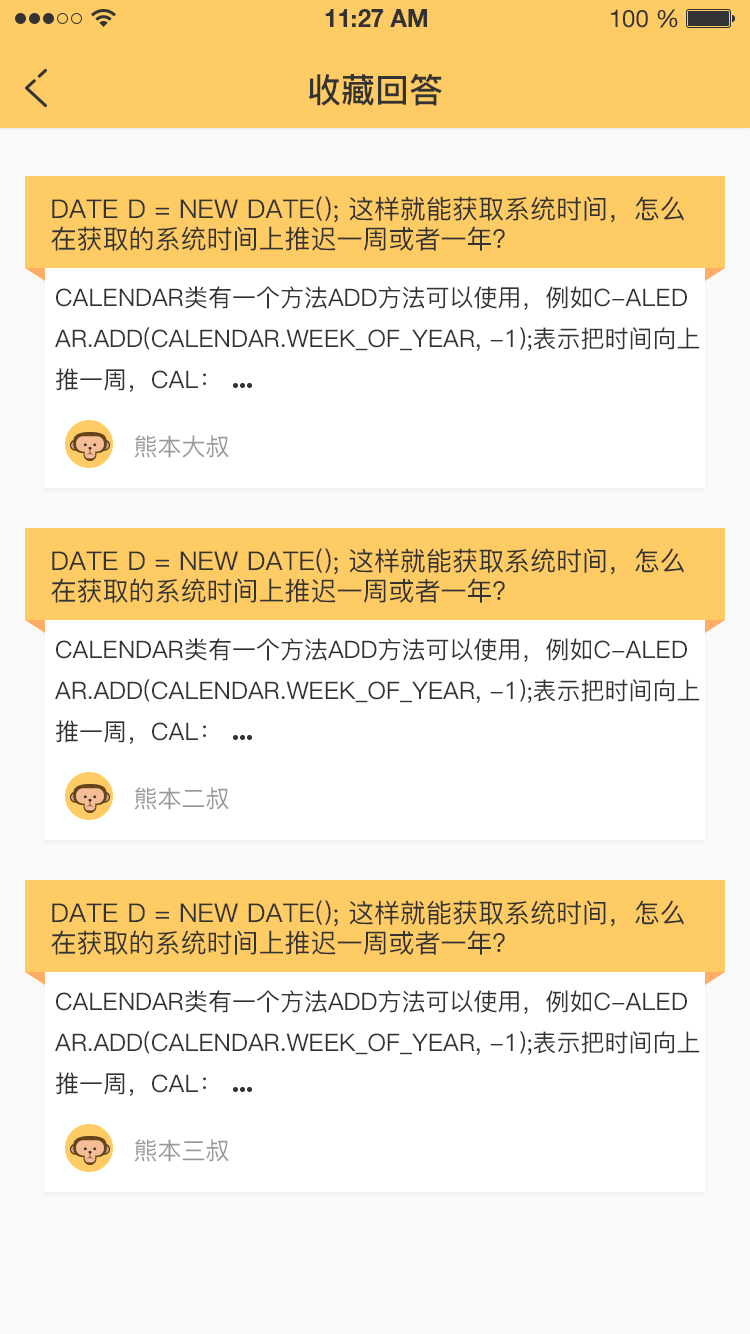
<style>
.page{position:relative;width:750px;height:1334px;background:#ffffff}
.page>*{position:absolute;margin:0}
.t1{font:34px "PingFang-SC-Bold";color:#333333;text-transform:uppercase}
.t2{font:26px/30px "PingFang-SC-Medium";color:#333333;text-transform:uppercase}
.t3{font:24px/41px "PingFang-SC-Medium";color:#333333;text-transform:uppercase}
.t4{font:24px "PingFang-SC-Medium";color:#999999;text-transform:uppercase}
</style>
<div class="page">
<p class="t1" style="left:309px;top:73px;width:133px;height:33px">收藏回答</p>
<p class="t2" style="left:51px;top:196px;width:633px;height:55px">Date d = new Date(); 这样就能获取系统时间，怎么<br>在获取的系统时间上推迟一周或者一年？</p>
<p class="t3" style="left:55px;top:286px;width:645px;height:106px">Calendar类有一个方法add方法可以使用，例如c-aled<br>ar.add(Calendar.WEEK_OF_YEAR, -1);表示把时间向上<br>推一周，cal：</p>
<p class="t4" style="left:134px;top:435px;width:95px;height:23px">熊本大叔</p>
<p class="t2" style="left:51px;top:548px;width:633px;height:55px">Date d = new Date(); 这样就能获取系统时间，怎么<br>在获取的系统时间上推迟一周或者一年？</p>
<p class="t3" style="left:55px;top:638px;width:645px;height:106px">Calendar类有一个方法add方法可以使用，例如c-aled<br>ar.add(Calendar.WEEK_OF_YEAR, -1);表示把时间向上<br>推一周，cal：</p>
<p class="t4" style="left:134px;top:787px;width:95px;height:23px">熊本二叔</p>
<p class="t2" style="left:51px;top:900px;width:633px;height:55px">Date d = new Date(); 这样就能获取系统时间，怎么<br>在获取的系统时间上推迟一周或者一年？</p>
<p class="t3" style="left:55px;top:990px;width:645px;height:106px">Calendar类有一个方法add方法可以使用，例如c-aled<br>ar.add(Calendar.WEEK_OF_YEAR, -1);表示把时间向上<br>推一周，cal：</p>
<p class="t4" style="left:134px;top:1139px;width:95px;height:23px">熊本三叔</p>
</div>
